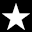
<style>
.page{position:relative;width:32px;height:32px;background:#000000}
.page>*{position:absolute;margin:0}
.t1{font:30px "KozGoPr6N-Regular";color:#ffffff}
</style>
<div class="page">
<p class="t1" style="left:2px;top:3px;width:28px;height:27px">★</p>
</div>
